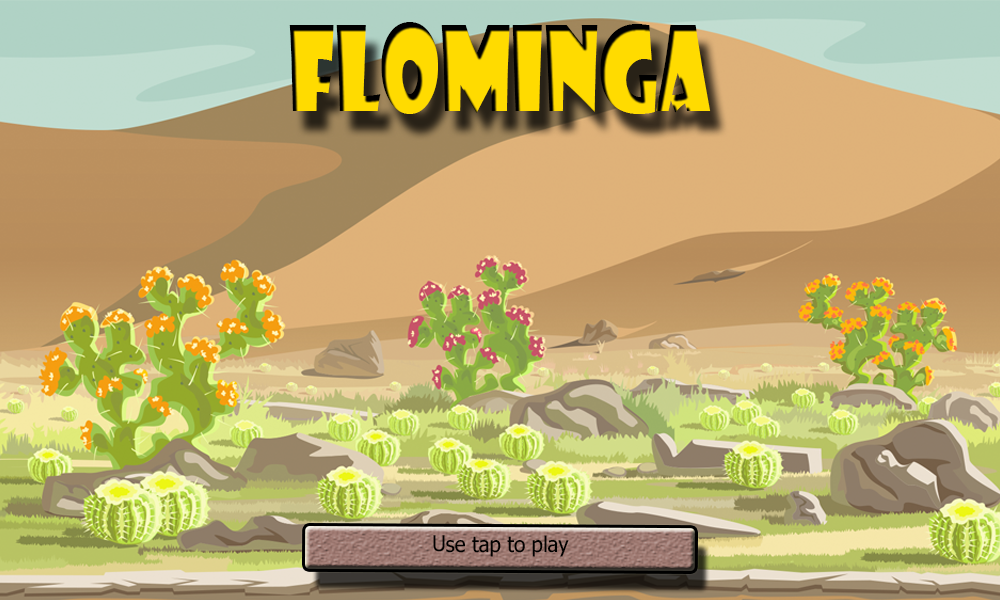
<style>
.page{position:relative;width:1000px;height:600px}
.page>*{position:absolute;margin:0}
.t1{font:114.9px "ShowcardGothic-Reg";color:#ffdb00;scale:0.75 1}
.t2{font:21.7px "Tahoma";color:#010101;scale:0.94 1}
</style>
<div class="page">
<p class="t1" style="left:289px;top:22px;width:422px;height:92px">FLOMINGA</p>
<p class="t2" style="left:433px;top:535px;width:136px;height:22px">Use tap to play</p>
</div>
